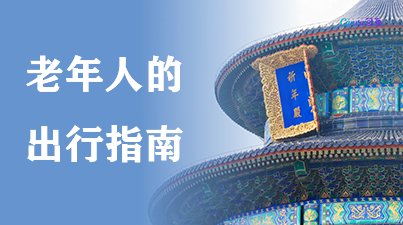
<style>
.page{position:relative;width:403px;height:225px;background:#6694ce}
.page>*{position:absolute;margin:0}
.t1{font:40px "FZCHSJW--GB1-0";color:#ffffff}
</style>
<div class="page">
<p class="t1" style="left:26px;top:55px;width:157px;height:108px;text-align:justify">老年人的<br>出行指南</p>
</div>
